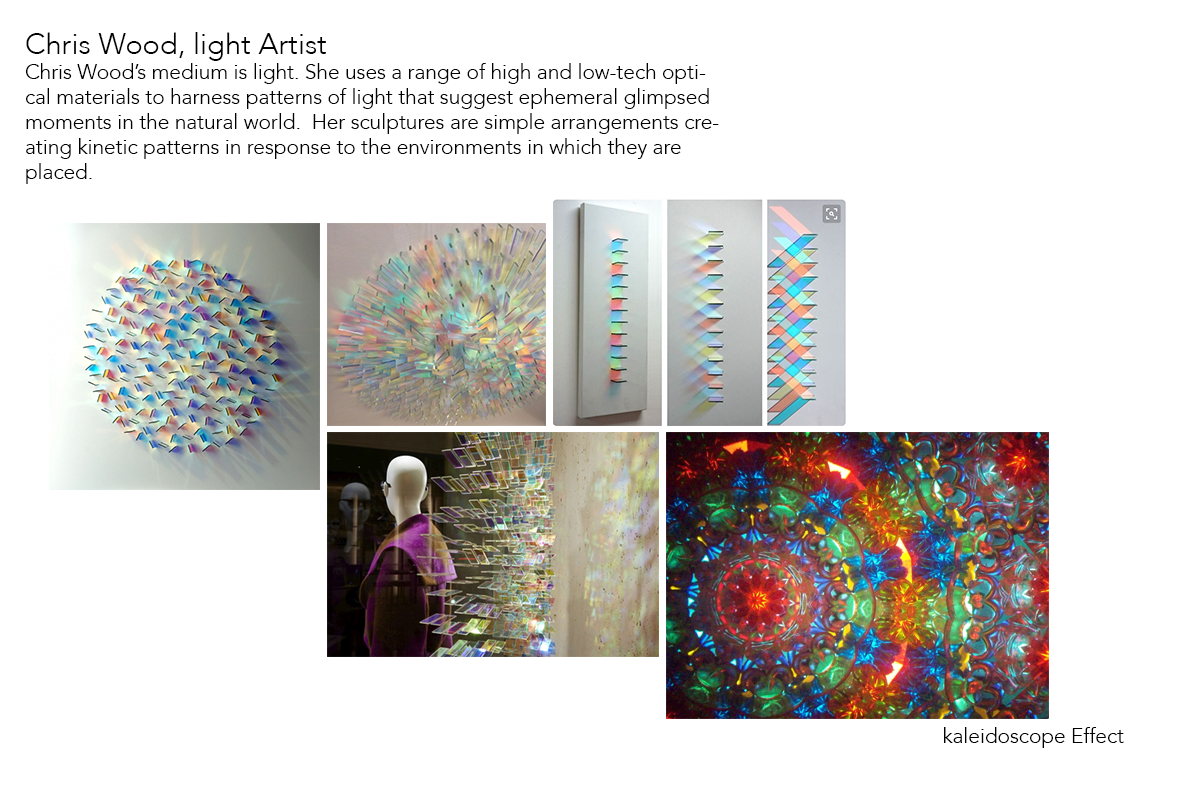
<style>
.page{position:relative;width:1200px;height:800px;background:#ffffff}
.page>*{position:absolute;margin:0}
.t1{font:20.8px "Avenir-Light";color:#000000}
.t2{font:29.2px "Avenir-Light";color:#000000}
</style>
<div class="page">
<p class="t1" style="left:26px;top:32px;width:693px;height:152px"><span class="t2">Chris Wood, light Artist <br></span>Chris Wood’s medium is light. She uses a range of high and low-tech optical materials to harness patterns of light that suggest ephemeral glimpsed moments in the natural world.  Her sculptures are simple arrangements creating kinetic patterns in response to the environments in which they are placed.</p>
<p class="t1" style="left:944px;top:727px;width:180px;height:21px">kaleidoscope Effect</p>
</div>
